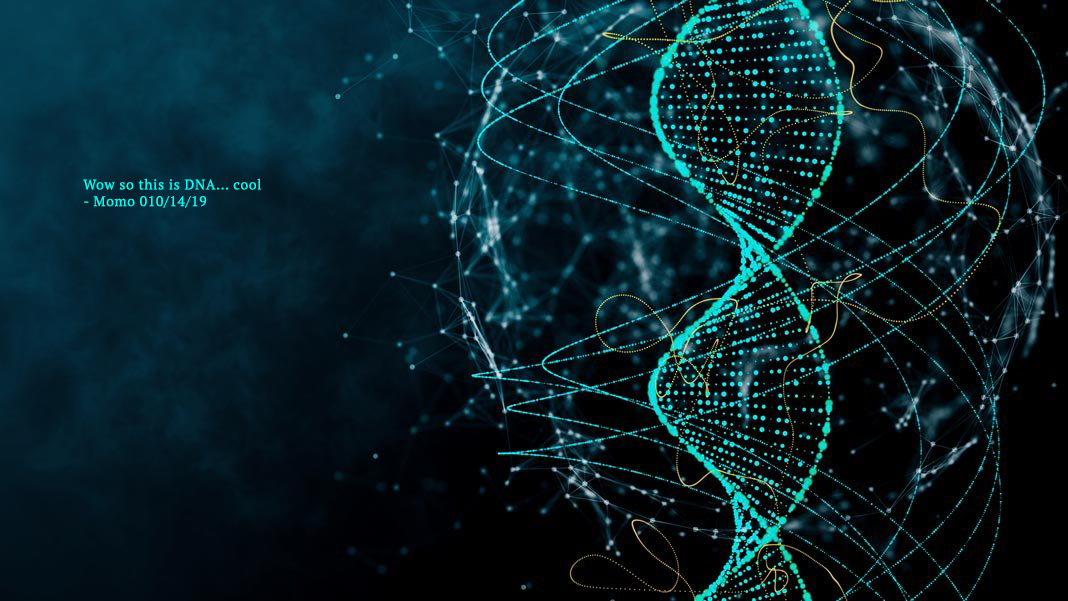
<style>
.page{position:relative;width:1068px;height:601px}
.page>*{position:absolute;margin:0}
.t1{font:13.9px "PTSerif-Regular";letter-spacing:0.05em;color:#0cf7ef}
</style>
<div class="page">
<p class="t1" style="left:83px;top:178px;width:178px;height:30px">Wow so this is DNA... cool<br>- Momo 010/14/19</p>
</div>
